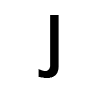
<style>
.page{position:relative;width:100px;height:100px;background:#ffffff}
.page>*{position:absolute;margin:0}
.t1{font:100px "TwCenMT-Condensed";color:#000000}
</style>
<div class="page">
<p class="t1" style="left:38px;top:15px;width:21px;height:63px">J</p>
</div>
